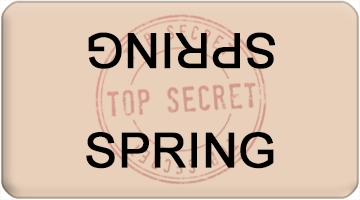
<style>
.page{position:relative;width:360px;height:200px;background:#e8d0bb}
.page>*{position:absolute;margin:0}
.t1{font:48px "ArialMT";color:#000000;font-weight:bold}
</style>
<div class="page">
<p class="t1" style="left:88px;top:32px;width:187px;height:37px;rotate:180deg">SPRING</p>
<p class="t1" style="left:86px;top:132px;width:188px;height:37px">SPRING</p>
</div>
